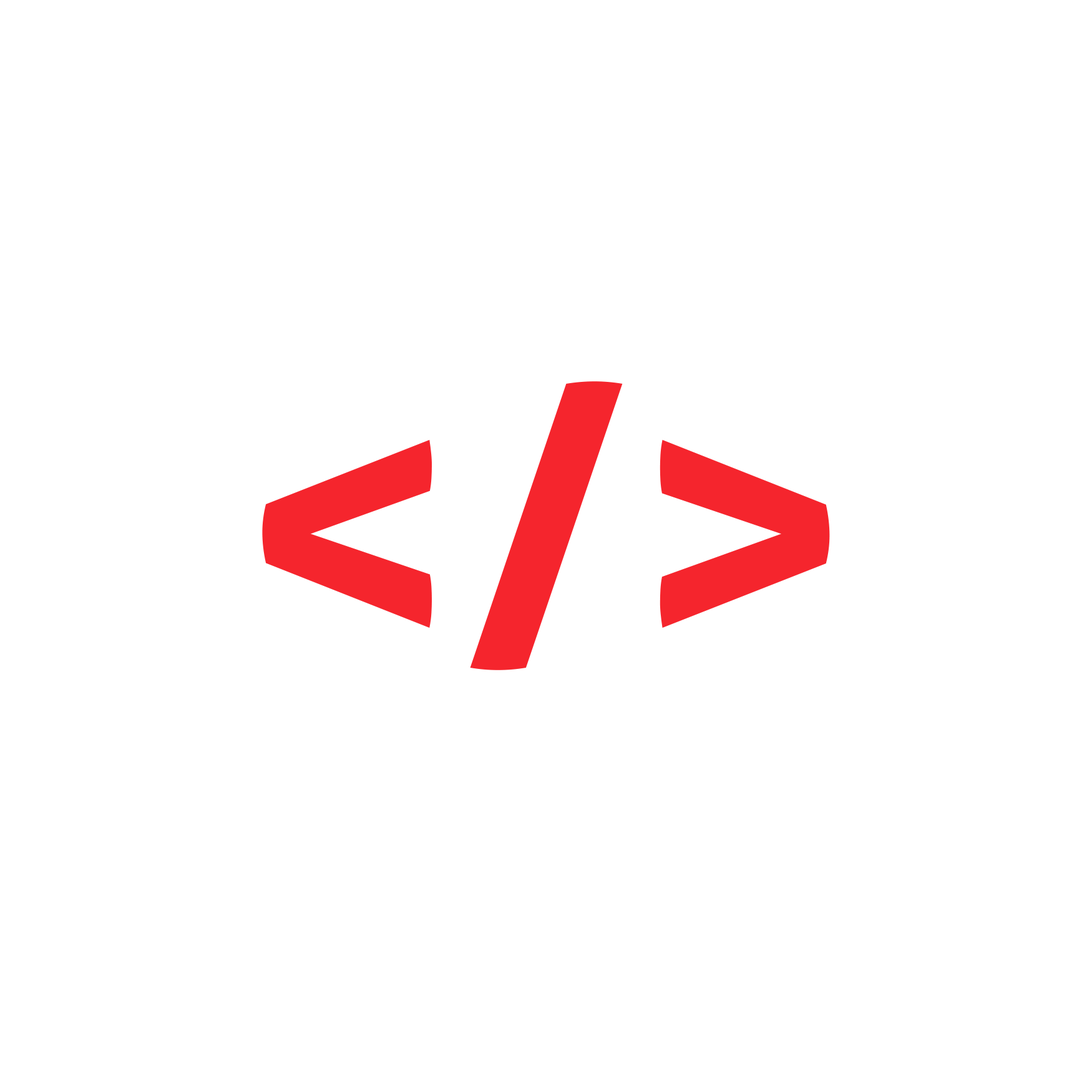
<style>
.page{position:relative;width:1092px;height:1092px;background:#ffffff}
.page>*{position:absolute;margin:0}
.t1{font:394.7px "Aller-Bold";color:#f5252c}
</style>
<div class="page">
<p class="t1" style="left:262px;top:381px;width:568px;height:289px">&lt;/&gt;</p>
</div>
